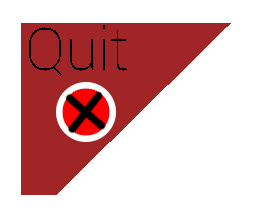
<style>
.page{position:relative;width:256px;height:216px;background:#ffffff}
.page>*{position:absolute;margin:0}
.t1{font:60px "Roboto-Thin";color:#000000}
</style>
<div class="page">
<p class="t1" style="left:29px;top:25px;width:98px;height:51px">Quit</p>
</div>
